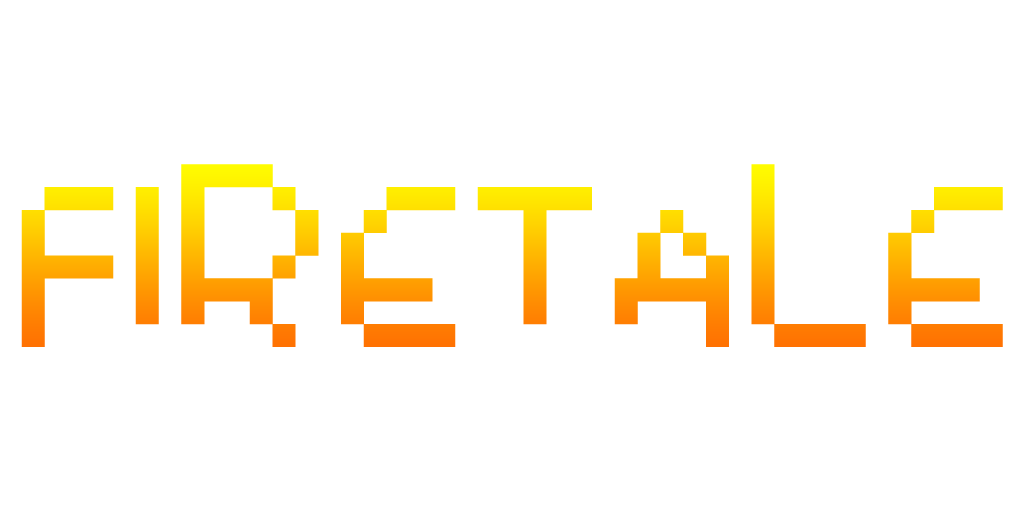
<style>
.page{position:relative;width:1024px;height:512px;background:#ffffff}
.page>*{position:absolute;margin:0}
.t1{font:364.9px "Hometown"}
</style>
<div class="page">
<p class="t1" style="left:21px;top:164px;width:982px;height:183px">Firetale</p>
</div>
